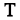
<style>
.page{position:relative;width:20px;height:20px;background:#ffffff}
.page>*{position:absolute;margin:0}
.t1{font:18px "Times-Roman";color:#000000;font-weight:bold}
</style>
<div class="page">
<p class="t1" style="left:4px;top:3px;width:12px;height:14px">T</p>
</div>
